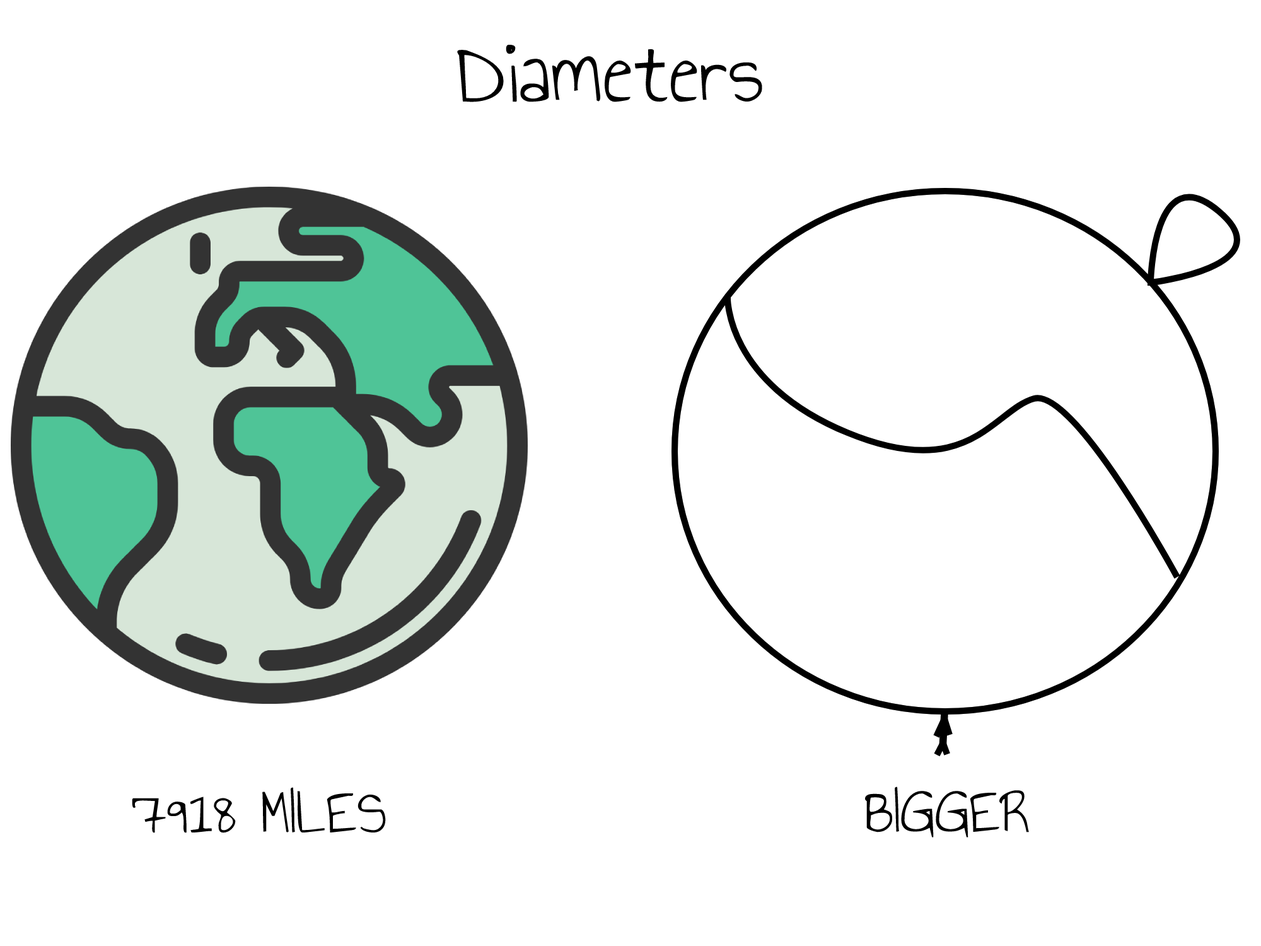
<style>
.page{position:relative;width:1261px;height:946px;background:#ffffff}
.page>*{position:absolute;margin:0}
.t1{font:94.6px "AnnieUseYourTelescope-Regular";color:#000000}
.t2{font:63px "AnnieUseYourTelescope-Regular";color:#000000}
</style>
<div class="page">
<p class="t1" style="left:457px;top:44px;width:306px;height:58px">Diameters</p>
<p class="t2" style="left:132px;top:787px;width:254px;height:46px">7918 MILES</p>
<p class="t2" style="left:864px;top:786px;width:165px;height:51px">BIGGER</p>
</div>
